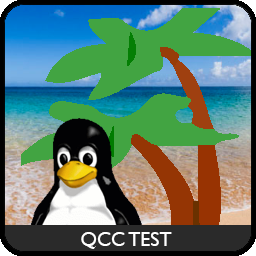
<style>
.page{position:relative;width:256px;height:256px;background:#42a442}
.page>*{position:absolute;margin:0}
.t1{font:20px "GillSansMT";color:#ffffff}
</style>
<div class="page">
<p class="t1" style="left:81px;top:232px;width:91px;height:17px">QCC TEST</p>
</div>
